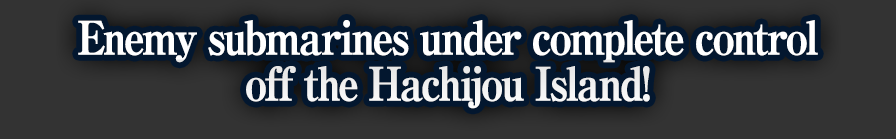
<style>
.page{position:relative;width:896px;height:139px;background:#333333}
.page>*{position:absolute;margin:0}
.t1{font:46px/46px "RyuminPro-ExBold";letter-spacing:-0.08em;color:#ffffff;font-weight:bold;scale:0.9 1}
</style>
<div class="page">
<p class="t1" style="left:78px;top:20px;width:740px;height:89px;text-align:center">Enemy submarines under complete control<br>off the Hachijou Island!</p>
</div>
